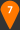
<style>
.page{position:relative;width:20px;height:30px;background:#ff7800}
.page>*{position:absolute;margin:0}
.t1{font:9px "OpenSans";color:#ffffff;font-weight:bold}
</style>
<div class="page">
<p class="t1" style="left:7px;top:6px;width:6px;height:8px">7</p>
</div>
